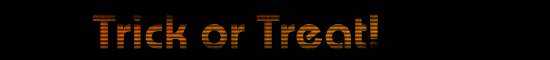
<style>
.page{position:relative;width:550px;height:60px;background:#000000}
.page>*{position:absolute;margin:0}
.t1{font:50px "BauhausC-Demibold"}
</style>
<div class="page">
<p class="t1" style="left:92px;top:13px;width:287px;height:37px">Trick or Treat!</p>
</div>
